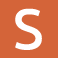
<style>
.page{position:relative;width:58px;height:58px;background:#d46439}
.page>*{position:absolute;margin:0}
.t1{font:59.1px "SukhumvitSet-SemiBold";color:#ffffff}
</style>
<div class="page">
<p class="t1" style="left:15px;top:8px;width:27px;height:42px">S</p>
</div>
